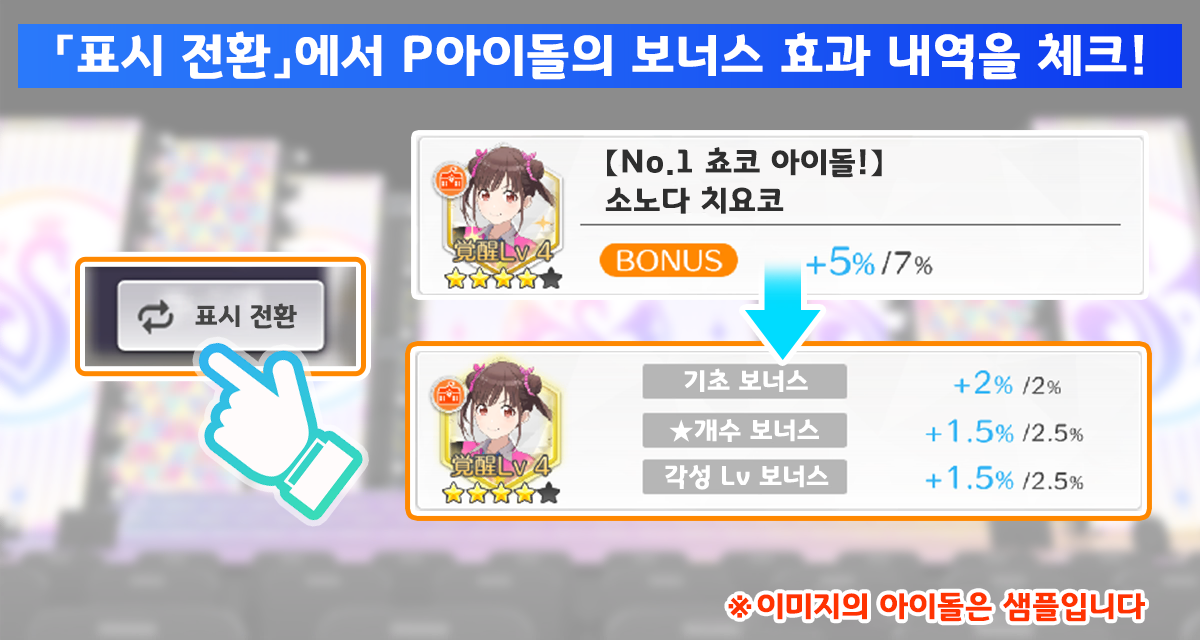
<style>
.page{position:relative;width:1200px;height:640px}
.page>*{position:absolute;margin:0}
.t1{font:50.7px "GyeonggiTitleB";letter-spacing:0.03em;color:#ffffff}
.t2{font:32px "GyeonggiTitleB";letter-spacing:0.03em;color:#2e2e2e}
.t3{font:26.7px "GyeonggiTitleB";letter-spacing:0.03em;color:#454545}
.t4{font:26.7px "GyeonggiTitleB";letter-spacing:0.03em;color:#ffffff}
.t5{font:32px "GyeonggiTitleB";letter-spacing:0.03em;color:#ff3301}
</style>
<div class="page">
<p class="t1" style="left:57px;top:31px;width:1086px;height:49px">「표시 전환」에서 P아이돌의 보너스 효과 내역을 체크!</p>
<p class="t2" style="left:607px;top:147px;width:275px;height:31px">【No.1 쵸코 아이돌!】</p>
<p class="t2" style="left:605px;top:186px;width:179px;height:28px">소노다 치요코</p>
<p class="t3" style="left:195px;top:303px;width:102px;height:26px">표시 전환</p>
<p class="t4" style="left:684px;top:368px;width:124px;height:24px">기초 보너스</p>
<p class="t4" style="left:669px;top:419px;width:150px;height:23px">★개수 보너스</p>
<p class="t4" style="left:665px;top:464px;width:164px;height:26px">각성 Lv 보너스</p>
<p class="t5" style="left:728px;top:592px;width:417px;height:30px">※ 이미지의 아이돌은 샘플입니다</p>
</div>
